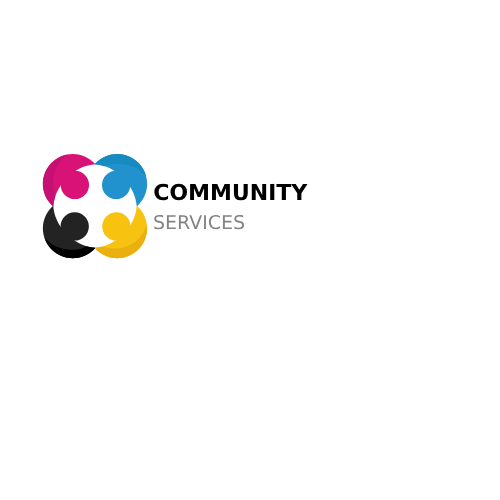
<style>
.page{position:relative;width:500px;height:500px;background:#ffffff}
.page>*{position:absolute;margin:0}
.t1{font:22px "'Montserrat-ExtraBold'";color:#000000}
.t2{font:19px "'Montserrat-Regular'";color:#818384}
</style>
<div class="page">
<p class="t1" style="left:154px;top:183px;width:154px;height:18px">COMMUNITY</p>
<p class="t2" style="left:154px;top:214px;width:91px;height:16px">SERVICES</p>
</div>
